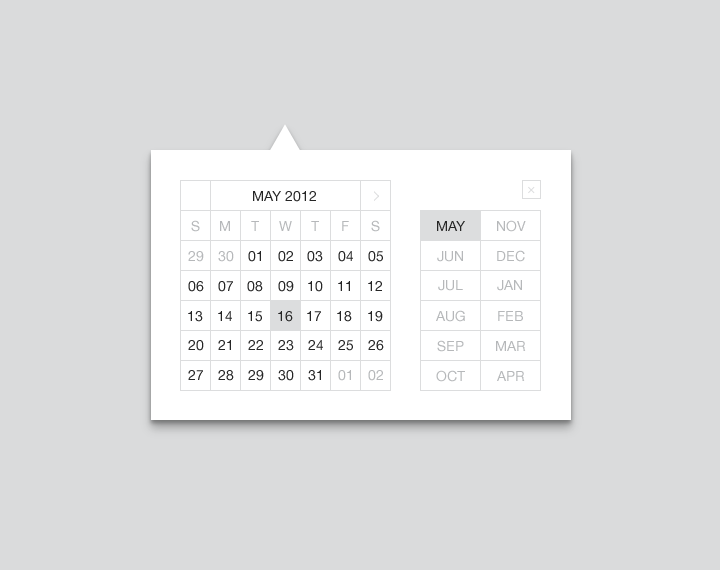
<style>
.page{position:relative;width:720px;height:570px;background:#dadbdc}
.page>*{position:absolute;margin:0}
.t1{font:14px "HelveticaNeue";color:#262626}
.t2{font:14px "HelveticaNeue";color:#b6b8ba}
</style>
<div class="page">
<p class="t1" style="left:253px;top:191px;width:63px;height:11px">MAY 2012</p>
<p class="t2" style="left:191px;top:220px;width:9px;height:12px">S</p>
<p class="t2" style="left:220px;top:221px;width:10px;height:10px">M</p>
<p class="t2" style="left:251px;top:221px;width:8px;height:10px">T</p>
<p class="t2" style="left:279px;top:221px;width:13px;height:10px">W</p>
<p class="t2" style="left:311px;top:221px;width:8px;height:10px">T</p>
<p class="t2" style="left:342px;top:221px;width:7px;height:10px">F</p>
<p class="t2" style="left:371px;top:220px;width:9px;height:12px">S</p>
<p class="t1" style="left:437px;top:221px;width:28px;height:10px">MAY</p>
<p class="t2" style="left:497px;top:220px;width:29px;height:12px">NOV</p>
<p class="t2" style="left:188px;top:251px;width:16px;height:11px">29</p>
<p class="t2" style="left:218px;top:251px;width:16px;height:11px">30</p>
<p class="t1" style="left:248px;top:251px;width:13px;height:11px">01</p>
<p class="t1" style="left:278px;top:251px;width:15px;height:11px">02</p>
<p class="t1" style="left:307px;top:251px;width:16px;height:11px">03</p>
<p class="t1" style="left:338px;top:251px;width:15px;height:11px">04</p>
<p class="t1" style="left:368px;top:251px;width:15px;height:11px">05</p>
<p class="t2" style="left:437px;top:251px;width:26px;height:11px">JUN</p>
<p class="t2" style="left:497px;top:250px;width:28px;height:12px">DEC</p>
<p class="t1" style="left:188px;top:281px;width:16px;height:11px">06</p>
<p class="t1" style="left:218px;top:281px;width:15px;height:11px">07</p>
<p class="t1" style="left:247px;top:281px;width:16px;height:11px">08</p>
<p class="t1" style="left:278px;top:281px;width:16px;height:11px">09</p>
<p class="t1" style="left:308px;top:281px;width:15px;height:11px">10</p>
<p class="t1" style="left:338px;top:281px;width:12px;height:10px">11</p>
<p class="t1" style="left:368px;top:281px;width:14px;height:10px">12</p>
<p class="t2" style="left:438px;top:280px;width:25px;height:11px">JUL</p>
<p class="t2" style="left:497px;top:280px;width:25px;height:11px">JAN</p>
<p class="t1" style="left:188px;top:311px;width:15px;height:11px">13</p>
<p class="t1" style="left:218px;top:311px;width:14px;height:10px">14</p>
<p class="t1" style="left:248px;top:311px;width:14px;height:11px">15</p>
<p class="t1" style="left:278px;top:311px;width:15px;height:11px">16</p>
<p class="t1" style="left:307px;top:311px;width:14px;height:10px">17</p>
<p class="t1" style="left:337px;top:311px;width:15px;height:11px">18</p>
<p class="t1" style="left:368px;top:311px;width:15px;height:11px">19</p>
<p class="t2" style="left:436px;top:310px;width:29px;height:12px">AUG</p>
<p class="t2" style="left:498px;top:311px;width:25px;height:10px">FEB</p>
<p class="t1" style="left:188px;top:340px;width:16px;height:11px">20</p>
<p class="t1" style="left:218px;top:340px;width:13px;height:10px">21</p>
<p class="t1" style="left:248px;top:340px;width:15px;height:10px">22</p>
<p class="t1" style="left:278px;top:340px;width:16px;height:11px">23</p>
<p class="t1" style="left:308px;top:340px;width:15px;height:10px">24</p>
<p class="t1" style="left:338px;top:340px;width:15px;height:11px">25</p>
<p class="t1" style="left:368px;top:340px;width:16px;height:11px">26</p>
<p class="t2" style="left:437px;top:340px;width:27px;height:12px">SEP</p>
<p class="t2" style="left:496px;top:341px;width:30px;height:10px">MAR</p>
<p class="t1" style="left:188px;top:370px;width:15px;height:10px">27</p>
<p class="t1" style="left:218px;top:370px;width:16px;height:11px">28</p>
<p class="t1" style="left:248px;top:370px;width:16px;height:11px">29</p>
<p class="t1" style="left:278px;top:370px;width:16px;height:11px">30</p>
<p class="t1" style="left:308px;top:370px;width:13px;height:11px">31</p>
<p class="t2" style="left:338px;top:370px;width:13px;height:11px">01</p>
<p class="t2" style="left:368px;top:370px;width:15px;height:11px">02</p>
<p class="t2" style="left:436px;top:370px;width:29px;height:12px">OCT</p>
<p class="t2" style="left:497px;top:371px;width:28px;height:10px">APR</p>
</div>
